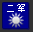
<style>
.page{position:relative;width:33px;height:32px;background:#000090}
.page>*{position:absolute;margin:0}
.t1{font:10.4px "SimSun";color:#ffffff}
</style>
<div class="page">
<p class="t1" style="left:7px;top:4px;width:18px;height:8px">二军</p>
</div>
